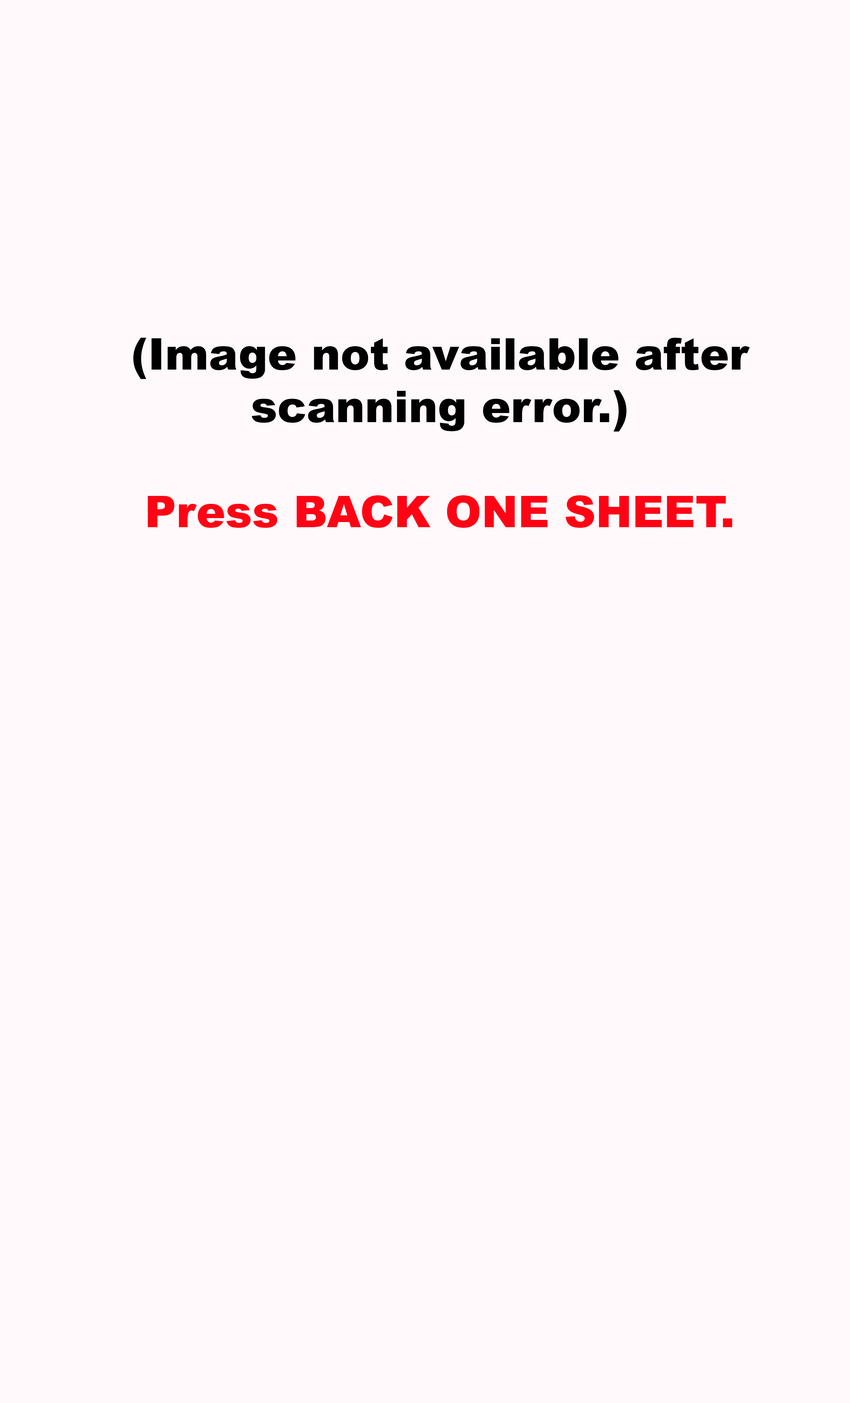
<style>
.page{position:relative;width:850px;height:1403px;background:#fff9fc}
.page>*{position:absolute;margin:0}
.t1{font:43.7px "Arial-Black";color:#000000}
.t2{font:43.7px "Arial-Black";color:#ff0315}
</style>
<div class="page">
<p class="t1" style="left:133px;top:338px;width:617px;height:190px;text-align:center">(Image not available after scanning error.)<br><span class="t2"><br>Press BACK ONE SHEET.</span></p>
</div>
